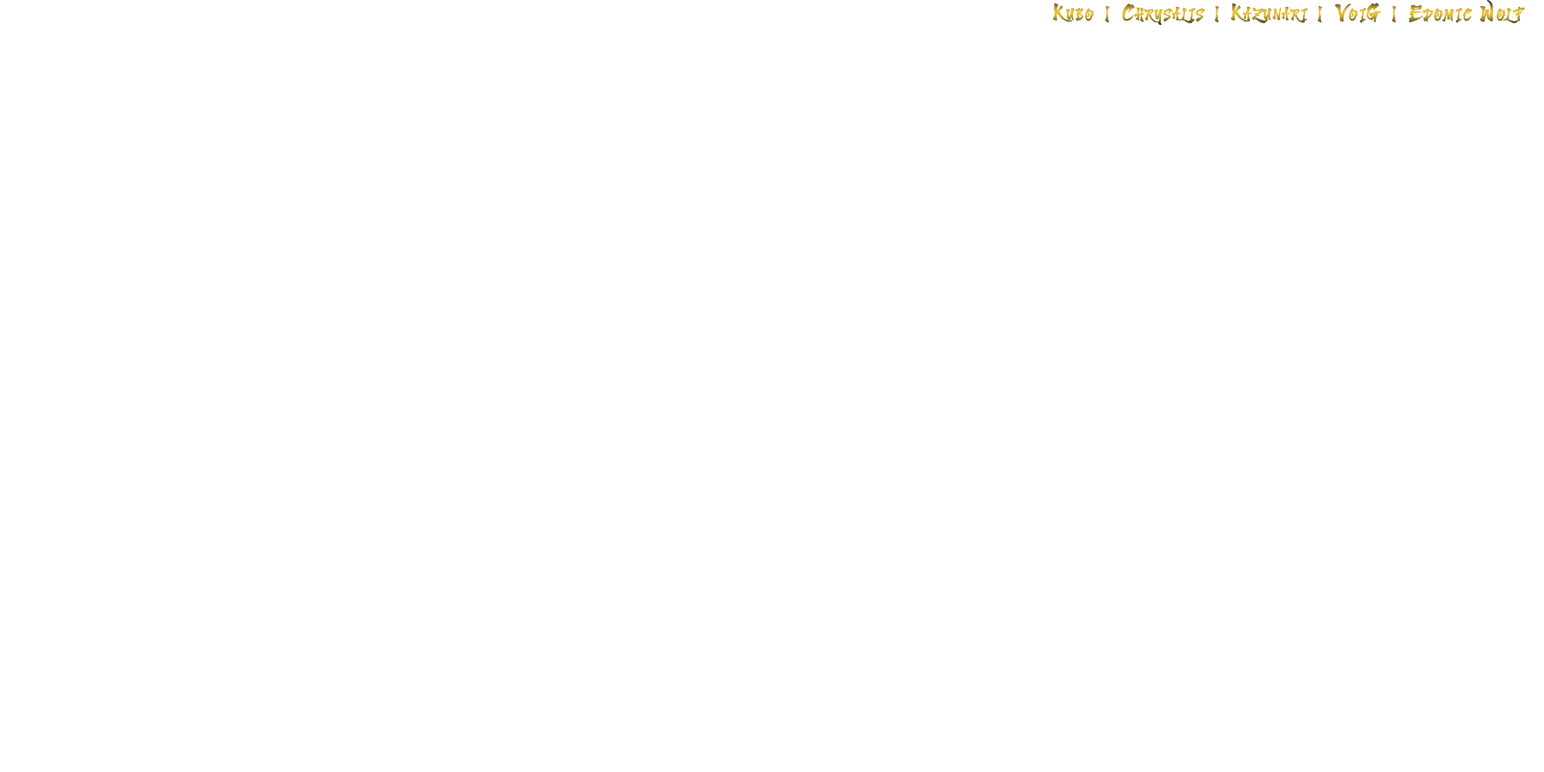
<style>
.page{position:relative;width:1544px;height:772px;background:#ffffff}
.page>*{position:absolute;margin:0}
.t1{font:22.6px "Harukaze-Demo";letter-spacing:0.1em;font-variant:small-caps;font-weight:bold}
</style>
<div class="page">
<p class="t1" style="left:1053px;top:0px;width:472px;height:25px">Kubo | Chrysalis | Kazunari | VoiG | Edomic Wolf</p>
</div>
